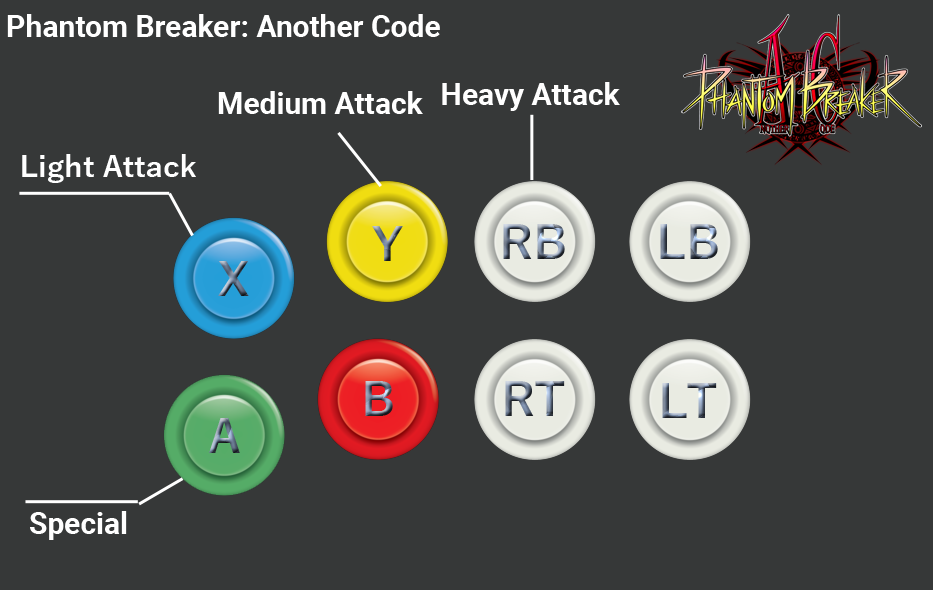
<style>
.page{position:relative;width:933px;height:590px;background:#363838}
.page>*{position:absolute;margin:0}
.t1{font:30px "Roboto-Bold";color:#ffffff}
.t2{font:30px "YuGothic-Bold";color:#ffffff}
</style>
<div class="page">
<p class="t1" style="left:7px;top:14px;width:433px;height:23px">Phantom Breaker: Another Code</p>
<p class="t1" style="left:442px;top:82px;width:178px;height:29px">Heavy Attack</p>
<p class="t1" style="left:218px;top:91px;width:205px;height:23px">Medium Attack</p>
<p class="t2" style="left:22px;top:154px;width:174px;height:29px">Light Attack</p>
<p class="t1" style="left:30px;top:511px;width:97px;height:29px">Special</p>
</div>
